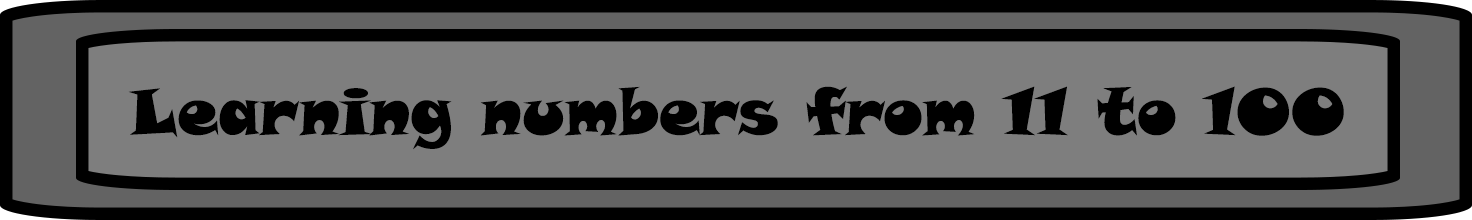
<style>
.page{position:relative;width:1472px;height:220px;background:#7e7e7e}
.page>*{position:absolute;margin:0}
.t1{font:65px "SnapITC-Regular";color:#000000}
</style>
<div class="page">
<p class="t1" style="left:128px;top:86px;width:1216px;height:64px">Learning numbers from 11 to 100</p>
</div>
